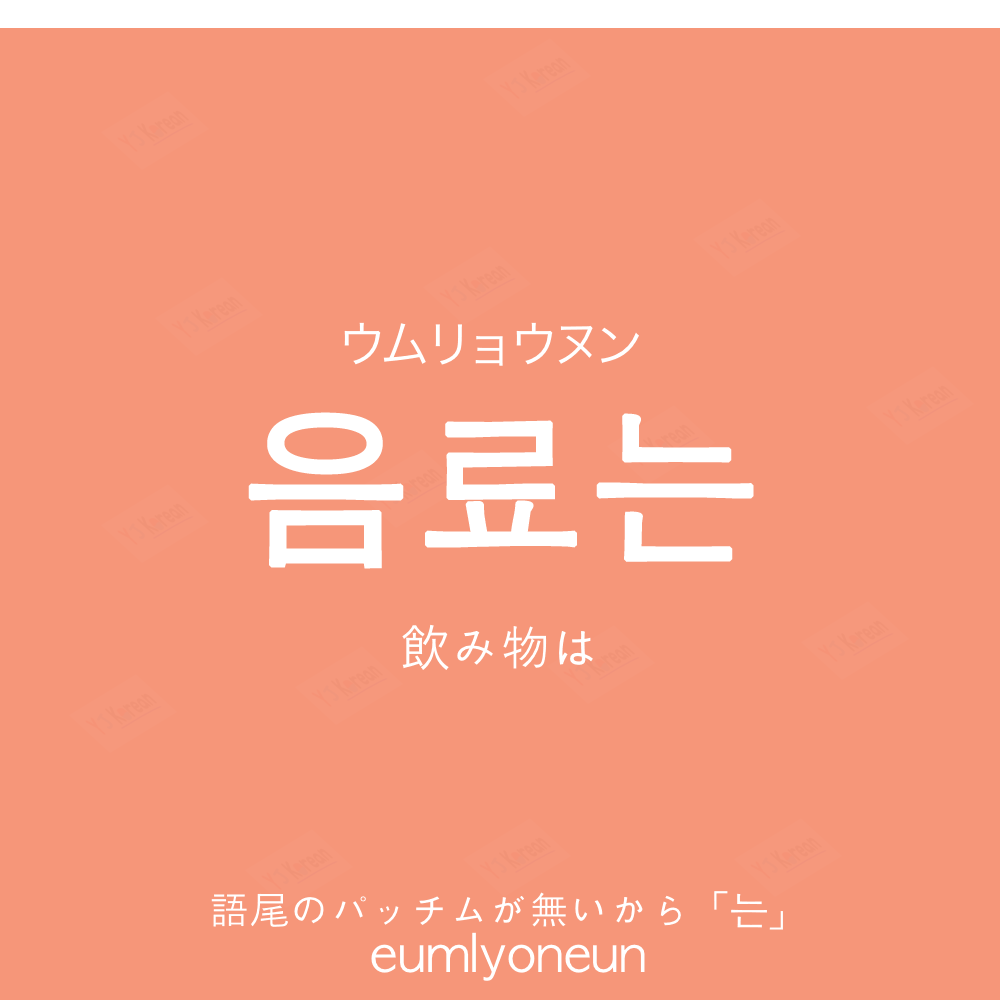
<style>
.page{position:relative;width:1000px;height:1000px;background:#f69679}
.page>*{position:absolute;margin:0}
.t1{font:50px "HiraKakuProN-W3";color:#ffffff;text-transform:uppercase}
.t2{font:170px "AppleGothic";color:#ffffff;font-weight:bold}
.t3{font:50px "AppleGothic";color:#ffffff}
.t4{font:50px "HiraKakuProN-W3";color:#ffffff}
.t5{font:40px "AppleGothic";color:#ffffff}
</style>
<div class="page">
<p class="t1" style="left:344px;top:322px;width:295px;height:44px">ウムリョウヌン</p>
<p class="t2" style="left:248px;top:412px;width:506px;height:157px">음료는</p>
<p class="t3" style="left:402px;top:624px;width:191px;height:46px"><span class="t4">飲</span>み物は</p>
<p class="t5" style="left:211px;top:891px;width:572px;height:39px">語尾のパッチムが無いから「는」</p>
<p class="t3" style="left:371px;top:932px;width:274px;height:49px">eumlyoneun</p>
</div>
